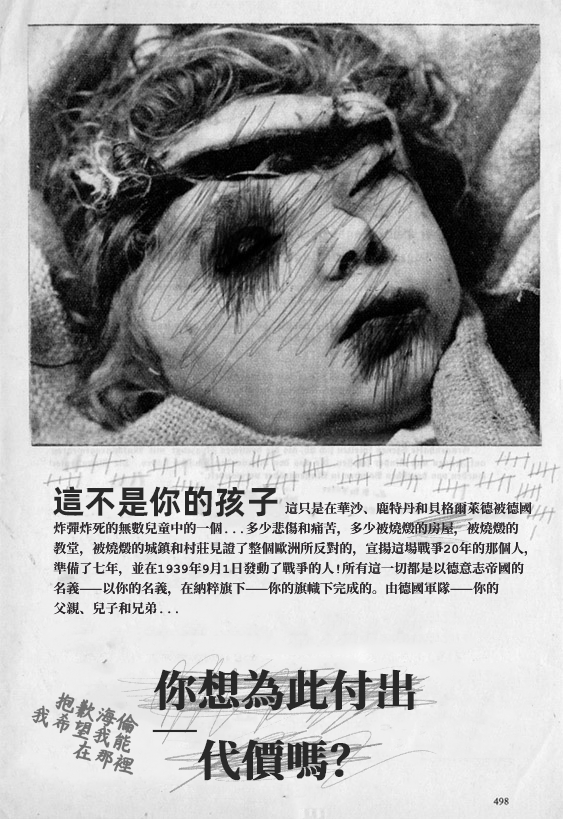
<style>
.page{position:relative;width:563px;height:819px}
.page>*{position:absolute;margin:0}
.t1{font:33px "AlibabaPuHuiTiB";color:#292929}
.t2{font:13px/20px "ContainmentBreach-Bold";color:#292529}
.t3{font:43px/70px "ContainmentBreach-Bold";color:#292929;font-weight:bold}
.t4{font:42.6px/70px "ContainmentBreach-Bold";color:#292929;font-weight:bold;text-decoration:underline}
.t5{font:21px/20px "YRDZSTJF";color:#717171;font-weight:bold}
</style>
<div class="page">
<p class="t1" style="left:53px;top:486px;width:225px;height:32px">這不是你的孩子</p>
<p class="t2" style="left:53px;top:501px;width:479px;height:114px">這只是在華沙、鹿特丹和貝格爾萊德被德國<br>炸彈炸死的無數兒童中的一個...多少悲傷和痛苦，多少被燒燬的房屋，被燒燬的<br>教堂，被燒燬的城鎮和村莊見證了整個歐洲所反對的，宣揚這場戰爭20年的那個人，<br>準備了七年，並在1939年9月1日發動了戰爭的人！所有這一切都是以德意志帝國的<br>名義——以你的名義，在納粹旗下——你的旗幟下完成的。由德國軍隊——你的<br>父親、兒子和兄弟...</p>
<p class="t3" style="left:152px;top:669px;width:264px;height:112px;text-align:center"><span class="t4">你</span>想為此付出<br>代價嗎？</p>
<p class="t5" style="left:31px;top:692px;width:108px;height:83px;rotate:18deg">抱歉海倫<br>我希望我能<br>        在那裡</p>
</div>
